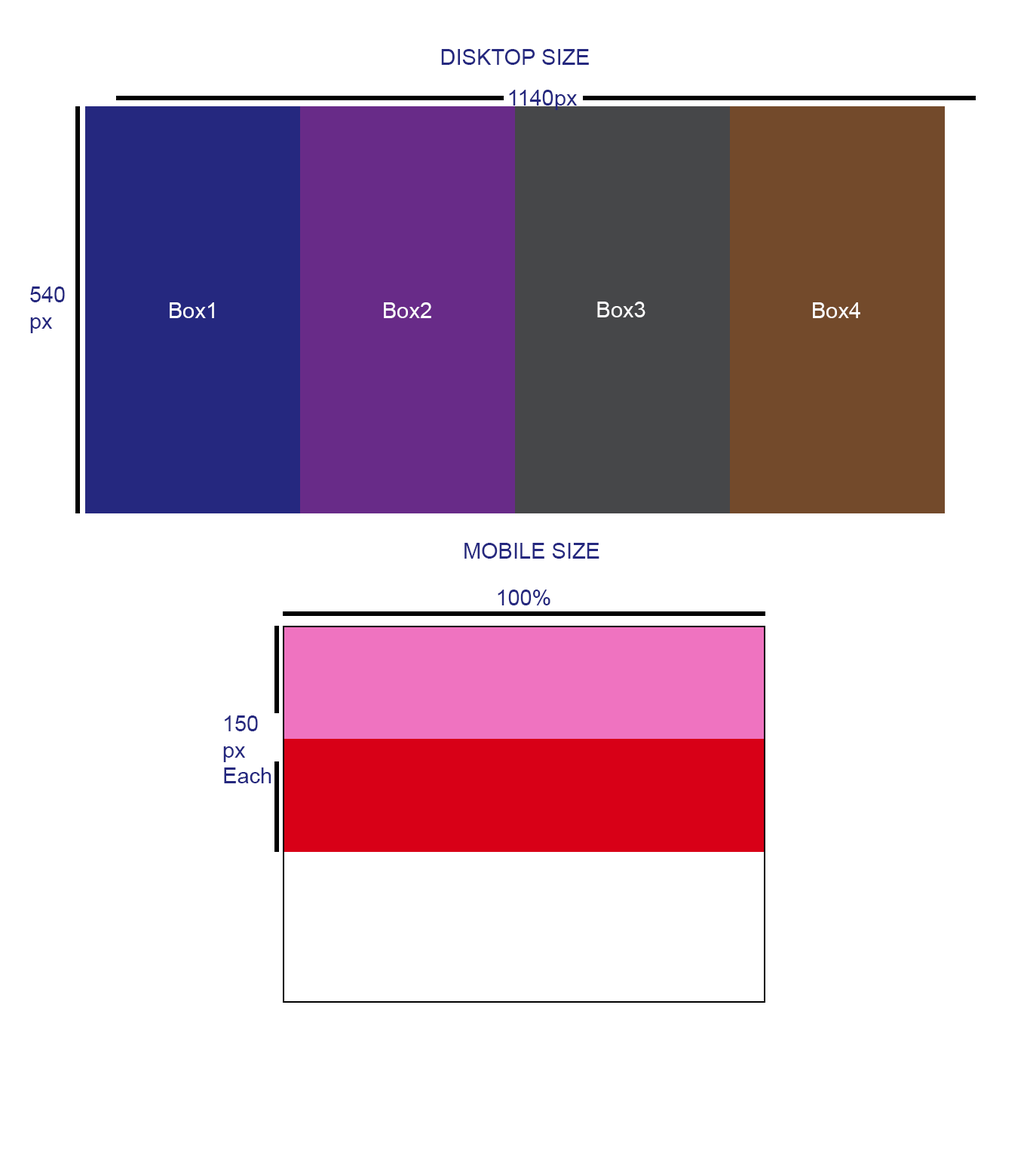
<style>
.page{position:relative;width:1030px;height:1158px;background:#ffffff}
.page>*{position:absolute;margin:0}
.t1{font:21.9px "ArialMT";color:#25287f}
.t2{font:21.9px "ArialMT";color:#fefefe}
</style>
<div class="page">
<p class="t1" style="left:441px;top:49px;width:148px;height:16px">DISKTOP SIZE</p>
<p class="t1" style="left:509px;top:90px;width:68px;height:20px">1140px</p>
<p class="t1" style="left:30px;top:286px;width:35px;height:47px">540<br>px</p>
<p class="t2" style="left:170px;top:302px;width:44px;height:16px">Box1</p>
<p class="t2" style="left:384px;top:302px;width:47px;height:16px">Box2</p>
<p class="t2" style="left:597px;top:302px;width:48px;height:15px">Box3</p>
<p class="t2" style="left:813px;top:302px;width:47px;height:16px">Box4</p>
<p class="t1" style="left:464px;top:543px;width:135px;height:16px">MOBILE SIZE</p>
<p class="t1" style="left:498px;top:590px;width:52px;height:15px">100%</p>
<p class="t1" style="left:223px;top:715px;width:48px;height:68px">150<br>px<br>Each</p>
</div>
